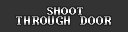
<style>
.page{position:relative;width:128px;height:32px;background:#333333}
.page>*{position:absolute;margin:0}
.t1{font:14px "Terminal"}
</style>
<div class="page">
<p class="t1" style="left:16px;top:16px;width:95px;height:9px">THROUGH DOOR</p>
</div>
